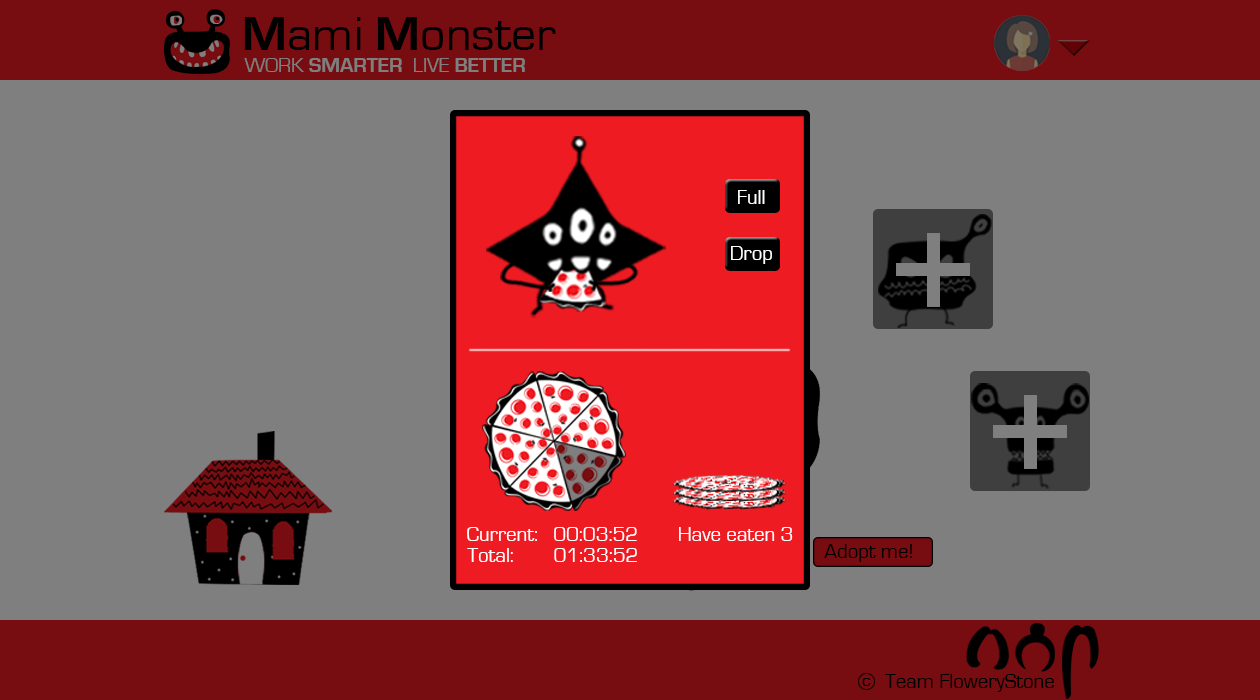
<style>
.page{position:relative;width:1260px;height:700px;background:#7f7f7f}
.page>*{position:absolute;margin:0}
.t1{font:50px "EurostileRegular";color:#000000}
.t2{font:50px "EurostileBold";color:#000000}
.t3{font:20.8px "EurostileBold";color:#7f7f7f}
.t4{font:20.8px "EurostileRegular";color:#7f7f7f}
.t5{font:20.8px "EurostileRegular";color:#ffffff}
.t6{font:20.8px "EurostileRegular";color:#000000}
.t7{font:17.7px "EurostileRegular";color:#000000}
</style>
<div class="page">
<p class="t1" style="left:244px;top:17px;width:312px;height:33px"><span class="t2">M</span>ami <span class="t2">M</span>onster</p>
<p class="t3" style="left:244px;top:58px;width:281px;height:14px"><span class="t4">WORK </span>SMARTER  <span class="t4">LIVE </span>BETTER</p>
<p class="t5" style="left:738px;top:190px;width:27px;height:14px">Full</p>
<p class="t5" style="left:731px;top:246px;width:41px;height:18px">Drop</p>
<p class="t5" style="left:467px;top:527px;width:70px;height:14px">Current:</p>
<p class="t5" style="left:554px;top:527px;width:83px;height:14px">00:03:52</p>
<p class="t5" style="left:679px;top:527px;width:114px;height:14px">Have eaten 3</p>
<p class="t6" style="left:824px;top:544px;width:88px;height:18px">Adopt me!</p>
<p class="t5" style="left:467px;top:548px;width:46px;height:14px">Total:</p>
<p class="t5" style="left:554px;top:548px;width:83px;height:14px">01:33:52</p>
<p class="t7" style="left:862px;top:678px;width:9px;height:8px">c</p>
<p class="t6" style="left:885px;top:674px;width:169px;height:18px">Team FloweryStone</p>
</div>
